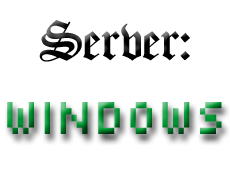
<style>
.page{position:relative;width:230px;height:195px;background:#ffffff}
.page>*{position:absolute;margin:0}
.t1{font:60px "Oldchristmas-Regular";color:#000000}
.t2{font:54px "Silkscreen";scale:0.83 1}
</style>
<div class="page">
<p class="t1" style="left:39px;top:20px;width:151px;height:42px">Server:</p>
<p class="t2" style="left:7px;top:102px;width:215px;height:32px">windows</p>
</div>
